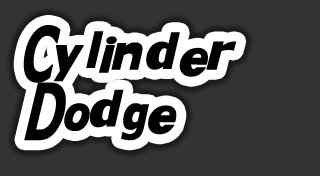
<style>
.page{position:relative;width:320px;height:176px;background:#333333}
.page>*{position:absolute;margin:0}
.t1{font:48px "KittyKatt";color:#000000}
</style>
<div class="page">
<p class="t1" style="left:23px;top:25px;width:214px;height:116px">Cylinder Dodge</p>
</div>
